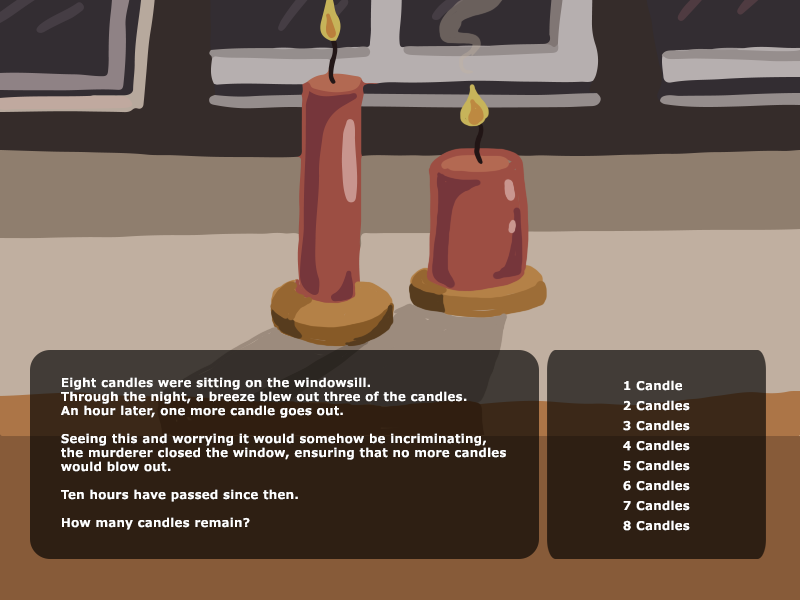
<style>
.page{position:relative;width:800px;height:600px}
.page>*{position:absolute;margin:0}
.t1{font:12px/14px "Meiryo-Bold";letter-spacing:0.05em;color:#ffffff}
.t2{font:12px/20px "Meiryo-Bold";letter-spacing:0.05em;color:#ffffff}
</style>
<div class="page">
<p class="t1" style="left:61px;top:377px;width:445px;height:153px">Eight candles were sitting on the windowsill. <br>Through the night, a breeze blew out three of the candles.<br>An hour later, one more candle goes out.<br><br>Seeing this and worrying it would somehow be incriminating,<br>the murderer closed the window, ensuring that no more candles<br>would blow out.<br><br>Ten hours have passed since then.<br><br>How many candles remain?</p>
<p class="t2" style="left:623px;top:380px;width:67px;height:151px">1 Candle<br>2 Candles<br>3 Candles<br>4 Candles<br>5 Candles<br>6 Candles<br>7 Candles<br>8 Candles</p>
</div>
